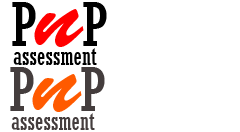
<style>
.page{position:relative;width:240px;height:132px;background:#ffffff}
.page>*{position:absolute;margin:0}
.t1{font:60px "Rockwell-Condensed";color:#000000}
.t2{font:100px "BrushScriptStd";color:#ff0000}
.t3{font:24px "Rockwell-Condensed";color:#000000}
.t4{font:60px "Rockwell-Condensed";color:#443d3d}
.t5{font:100px "BrushScriptStd";color:#ff5a00}
.t6{font:24px "Rockwell-Condensed";color:#443d3d}
</style>
<div class="page">
<p class="t1" style="left:12px;top:2px;width:95px;height:45px">P<span class="t2">n</span>P</p>
<p class="t3" style="left:13px;top:48px;width:84px;height:17px">assessment</p>
<p class="t4" style="left:10px;top:67px;width:95px;height:45px">P<span class="t5">n</span>P</p>
<p class="t6" style="left:11px;top:113px;width:84px;height:17px">assessment</p>
</div>
